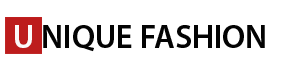
<style>
.page{position:relative;width:297px;height:71px;background:#ffffff}
.page>*{position:absolute;margin:0}
.t1{font:7.9px "MyriadPro-Semibold";color:#030303}
.t2{font:7.9px "MyriadPro-Semibold";color:#fcf9f9}
</style>
<div class="page">
<p class="t1" style="left:15px;top:25px;width:250px;height:27px"><span class="t2">U</span> NIQUE FASHION</p>
</div>
